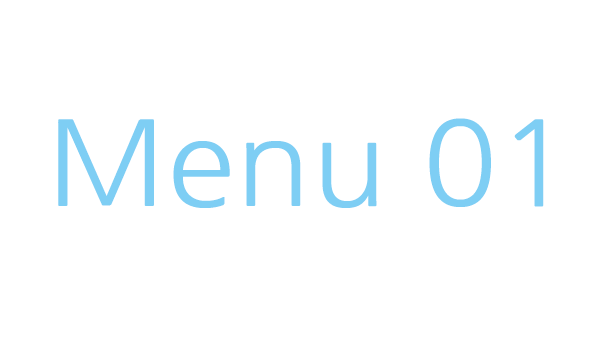
<style>
.page{position:relative;width:600px;height:337px;background:#ffffff}
.page>*{position:absolute;margin:0}
.t1{font:117px "NanumGothic";color:#7ecef4;scale:1.07 1}
</style>
<div class="page">
<p class="t1" style="left:58px;top:118px;width:486px;height:90px">Menu 01</p>
</div>
